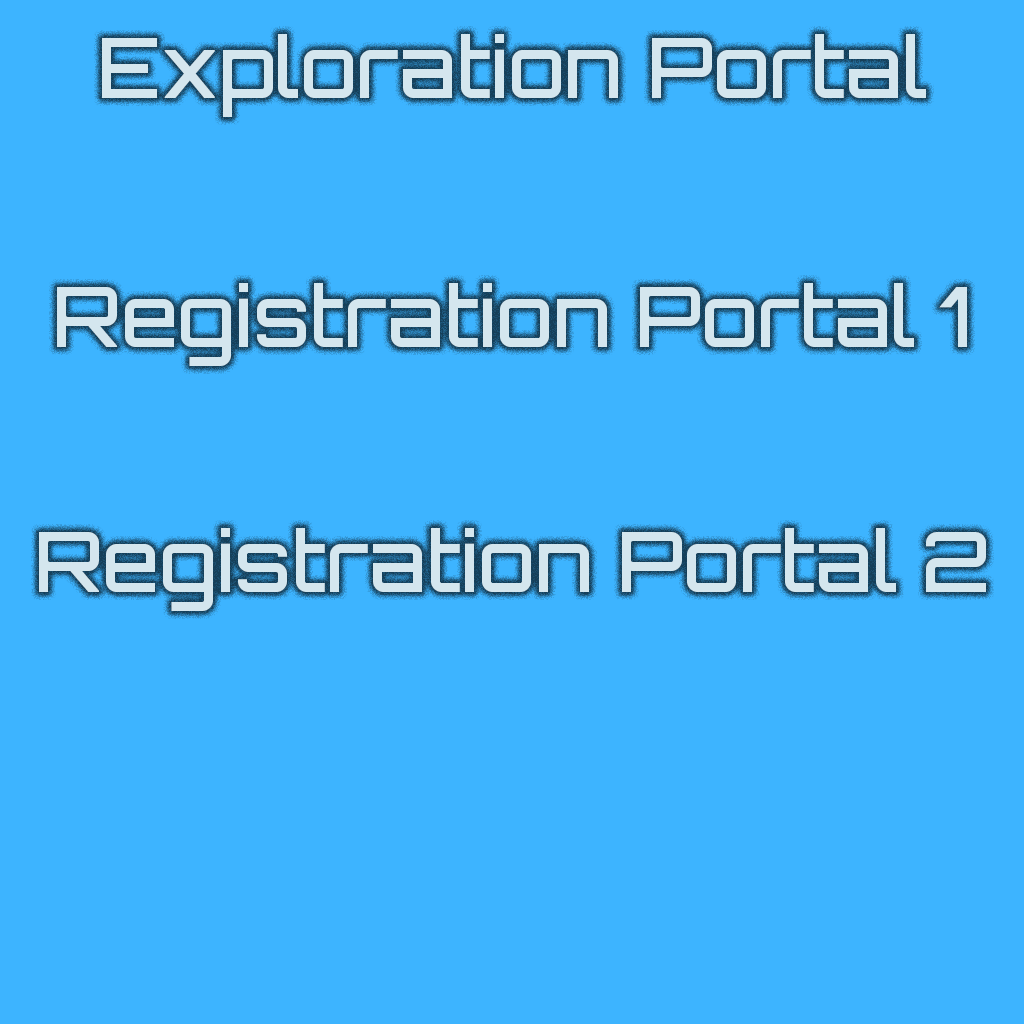
<style>
.page{position:relative;width:1024px;height:1024px;background:#3db4ff}
.page>*{position:absolute;margin:0}
.t1{font:83.3px "Orbitron-Medium";color:#d4e6ee}
</style>
<div class="page">
<p class="t1" style="left:102px;top:34px;width:824px;height:83px">Exploration Portal</p>
<p class="t1" style="left:57px;top:283px;width:910px;height:83px">Registration Portal 1</p>
<p class="t1" style="left:39px;top:528px;width:947px;height:83px">Registration Portal 2</p>
</div>
